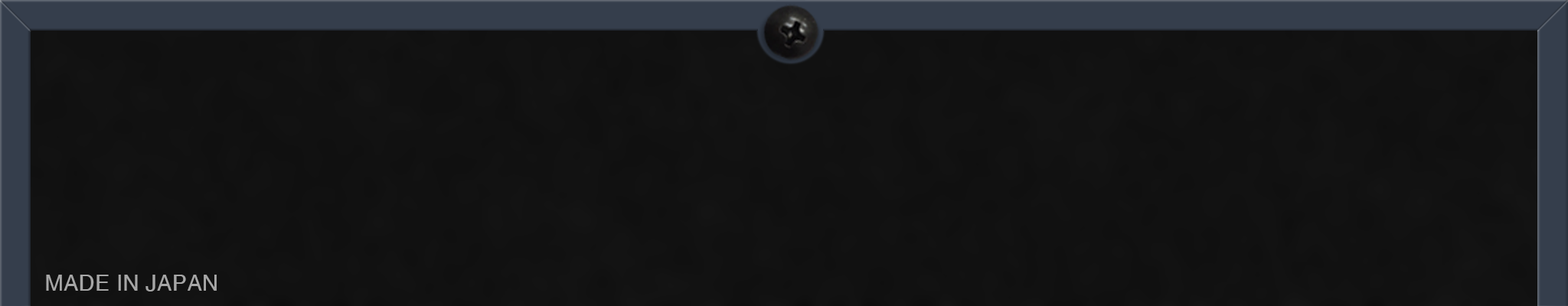
<style>
.page{position:relative;width:1568px;height:306px;background:#111111}
.page>*{position:absolute;margin:0}
.t1{font:22.3px "Helvetica";letter-spacing:0.01em;color:#a7a7a7}
</style>
<div class="page">
<p class="t1" style="left:46px;top:275px;width:171px;height:17px">MADE IN JAPAN</p>
</div>
